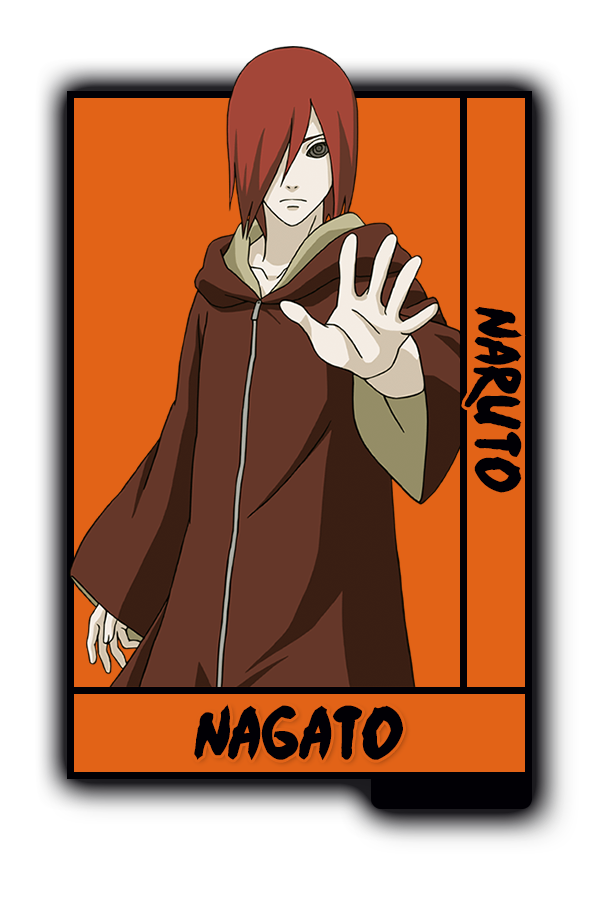
<style>
.page{position:relative;width:600px;height:900px;background:#e26317}
.page>*{position:absolute;margin:0}
.t1{font:52px "Ninja-Naruto";color:#010005}
.t2{font:60.3px "Ninja-Naruto";color:#010005}
</style>
<div class="page">
<p class="t1" style="left:464px;top:307px;width:59px;height:186px;rotate:90deg">Naruto</p>
<p class="t2" style="left:194px;top:704px;width:209px;height:57px">Nagato</p>
</div>
